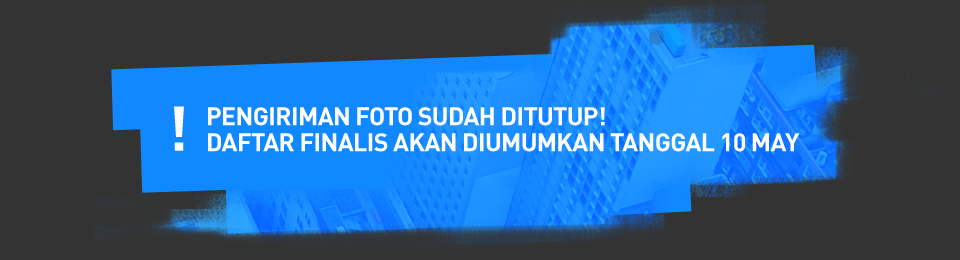
<style>
.page{position:relative;width:960px;height:260px;background:#333333}
.page>*{position:absolute;margin:0}
.t1{font:62px "DIN-Bold";color:#ffffff;text-transform:uppercase}
.t2{font:25px/26px "DIN-Bold";letter-spacing:-0.025em;color:#ffffff;text-transform:uppercase}
</style>
<div class="page">
<p class="t1" style="left:174px;top:106px;width:10px;height:45px">!</p>
<p class="t2" style="left:208px;top:107px;width:592px;height:45px">Pengiriman foto sudah ditutup!<br>Daftar finalis akan diumumkan tanggal 10 may</p>
</div>
